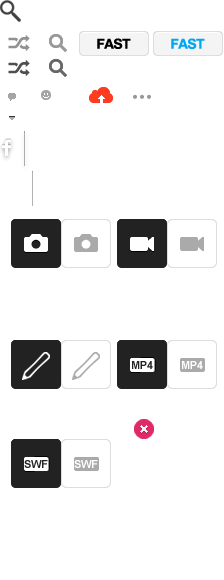
<style>
.page{position:relative;width:224px;height:580px;background:#ffffff}
.page>*{position:absolute;margin:0}
.t1{font:11px "Arial-BoldMT";letter-spacing:-0.025em;color:#222222}
.t2{font:11px "Arial-BoldMT";letter-spacing:-0.025em;color:#ffffff}
</style>
<div class="page">
<p class="t1" style="left:132px;top:361px;width:21px;height:8px">MP4</p>
<p class="t2" style="left:182px;top:361px;width:21px;height:8px">MP4</p>
<p class="t1" style="left:24px;top:460px;width:24px;height:8px">SWF</p>
<p class="t2" style="left:74px;top:460px;width:24px;height:8px">SWF</p>
</div>
